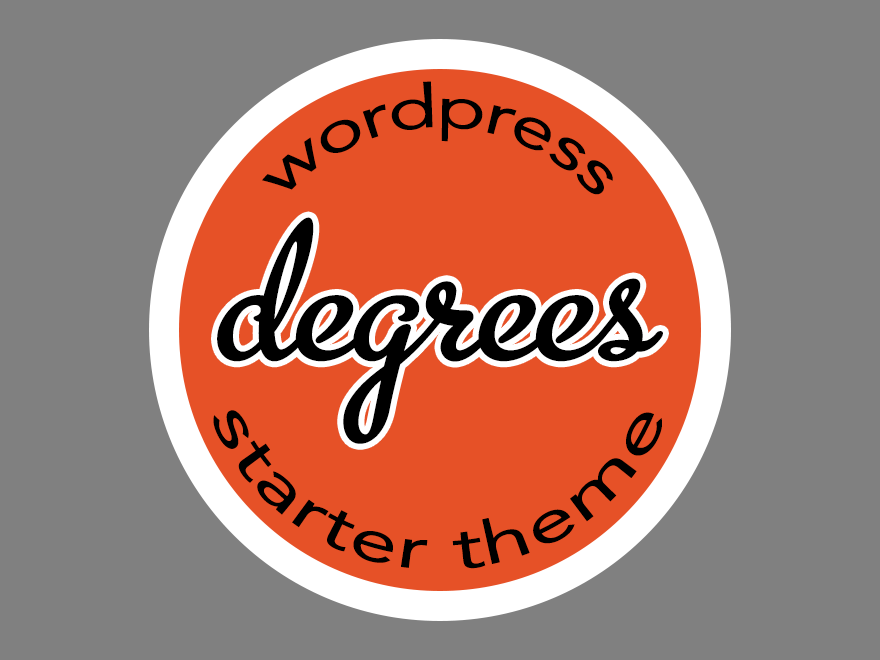
<style>
.page{position:relative;width:880px;height:660px;background:#808080}
.page>*{position:absolute;margin:0}
.t1{font:60px/320px "Avenir-Roman";color:#000000}
.t2{font:220px "MetroScript";color:#000000}
</style>
<div class="page">
<p class="t1" style="left:262px;top:81px;width:351px;height:114px;text-align:center">wordpress</p>
<p class="t2" style="left:217px;top:217px;width:446px;height:227px">degrees</p>
<p class="t1" style="left:213px;top:410px;width:449px;height:159px;text-align:center">starter theme</p>
</div>
